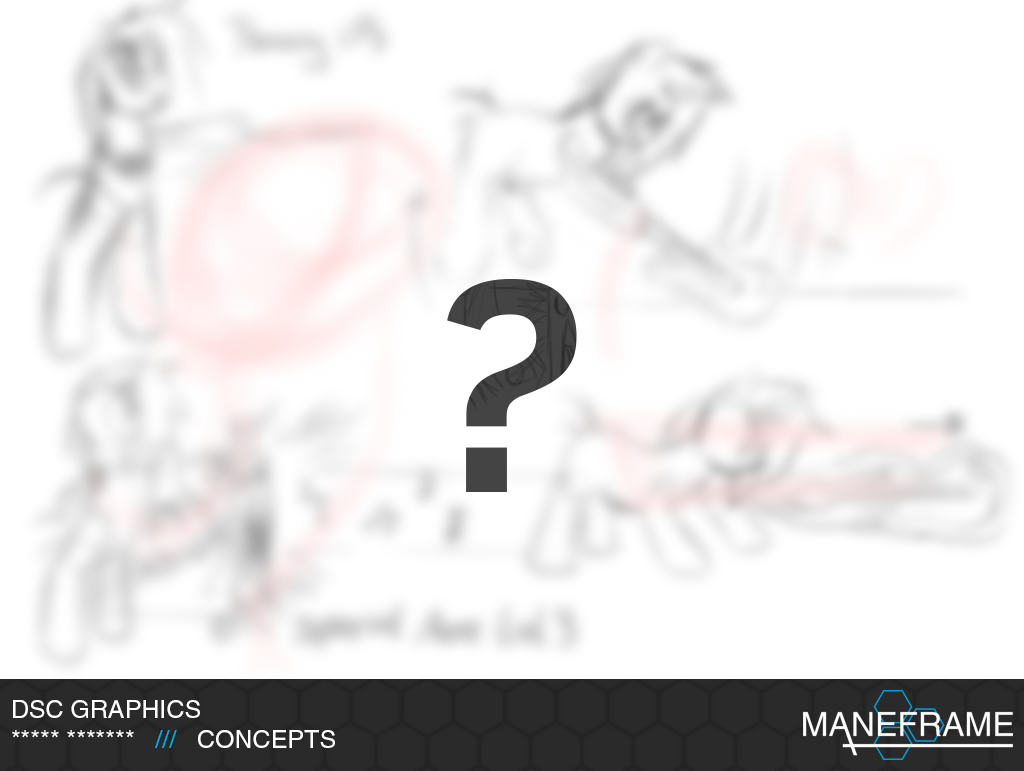
<style>
.page{position:relative;width:1024px;height:771px;background:#ffffff}
.page>*{position:absolute;margin:0}
.t1{font:25px "Helvetica";color:#ffffff}
.t2{font:25px "Helvetica";color:#00aeef}
</style>
<div class="page">
<p class="t1" style="left:12px;top:700px;width:323px;height:48px">DSC GRAPHICS<br>***** *******   <span class="t2">///</span>   CONCEPTS</p>
</div>
